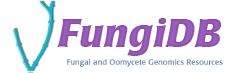
<style>
.page{position:relative;width:227px;height:73px;background:#ffffff}
.page>*{position:absolute;margin:0}
.t1{font:40px "PopplLaudatio-BoldItalic";letter-spacing:0.01em;color:#9155b1}
</style>
<div class="page">
<p class="t1" style="left:57px;top:18px;width:165px;height:38px">FungiDB</p>
</div>
